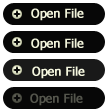
<style>
.page{position:relative;width:108px;height:112px;background:#070707}
.page>*{position:absolute;margin:0}
.t1{font:12px "Tahoma";color:#f1f3da;font-weight:bold}
.t2{font:12px "Tahoma";color:#f5f7df;font-weight:bold}
.t3{font:12px "Tahoma";color:#54554c;font-weight:bold}
</style>
<div class="page">
<p class="t1" style="left:31px;top:8px;width:53px;height:13px">Open File</p>
<p class="t1" style="left:31px;top:38px;width:53px;height:13px">Open File</p>
<p class="t2" style="left:32px;top:66px;width:53px;height:13px">Open File</p>
<p class="t3" style="left:30px;top:93px;width:53px;height:13px">Open File</p>
</div>
